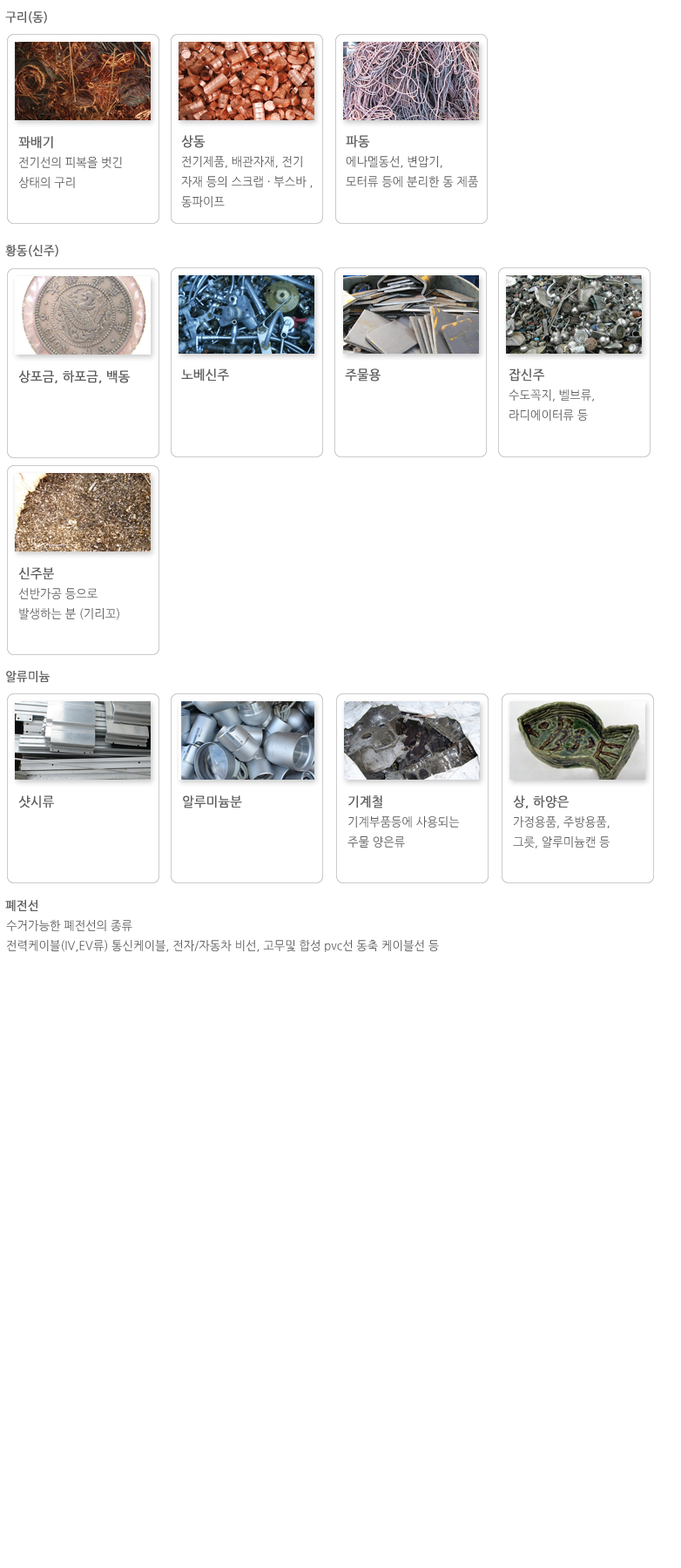
<style>
.page{position:relative;width:681px;height:1568px;background:#ffffff}
.page>*{position:absolute;margin:0}
.t1{font:12.2px "NanumGothic";color:#5e5e5e;font-weight:bold;scale:0.95 1}
.t2{font:12.2px/20px "NanumGothic";color:#5e5e5e;scale:0.95 1}
.t3{font:13.1px/20px "NanumGothic";color:#5e5e5e;font-weight:bold;scale:0.95 1}
.t4{font:13.1px "NanumGothic";color:#5e5e5e;font-weight:bold;scale:0.95 1}
</style>
<div class="page">
<p class="t1" style="left:5px;top:11px;width:42px;height:13px">구리(동)</p>
<p class="t2" style="left:18px;top:136px;width:104px;height:52px"><span class="t3">꽈배기<br></span>전기선의 피복을 벗긴 <br>상태의 구리</p>
<p class="t2" style="left:181px;top:135px;width:132px;height:72px"><span class="t3">상동<br></span>전기제품, 배관자재, 전기<br>자재 등의 스크랩 · 부스바 , <br>동파이프</p>
<p class="t2" style="left:346px;top:135px;width:132px;height:52px"><span class="t3">파동<br></span>에나멜동선, 변압기, <br>모터류 등에 분리한 동 제품</p>
<p class="t1" style="left:5px;top:245px;width:53px;height:12px">황동(신주)</p>
<p class="t4" style="left:18px;top:370px;width:112px;height:13px">상포금, 하포금, 백동</p>
<p class="t4" style="left:181px;top:368px;width:48px;height:14px">노베신주</p>
<p class="t4" style="left:345px;top:368px;width:36px;height:14px">주물용</p>
<p class="t2" style="left:509px;top:368px;width:85px;height:53px"><span class="t3">잡신주<br></span>수도꼭지, 벨브류, <br>라디에이터류 등</p>
<p class="t2" style="left:18px;top:567px;width:101px;height:53px"><span class="t3">신주분<br></span>선반가공 등으로 <br>발생하는 분 (기리꼬)</p>
<p class="t1" style="left:6px;top:671px;width:44px;height:12px">알류미늄</p>
<p class="t4" style="left:18px;top:795px;width:36px;height:13px">샷시류</p>
<p class="t4" style="left:183px;top:795px;width:59px;height:13px">알루미늄분</p>
<p class="t2" style="left:348px;top:795px;width:112px;height:53px"><span class="t3">기계철<br></span>기계부품등에 사용되는 <br>주물 양은류</p>
<p class="t2" style="left:513px;top:795px;width:97px;height:53px"><span class="t3">상, 하양은<br></span>가정용품, 주방용품, <br>그릇, 알루미늄캔 등</p>
<p class="t1" style="left:5px;top:900px;width:33px;height:12px">폐전선</p>
<p class="t2" style="left:6px;top:920px;width:433px;height:32px">수거가능한 폐전선의 종류 <br>전력케이블(IV,EV류) 통신케이블, 전자/자동차 비선, 고무및 합성 pvc선 동축 케이블선 등</p>
</div>
